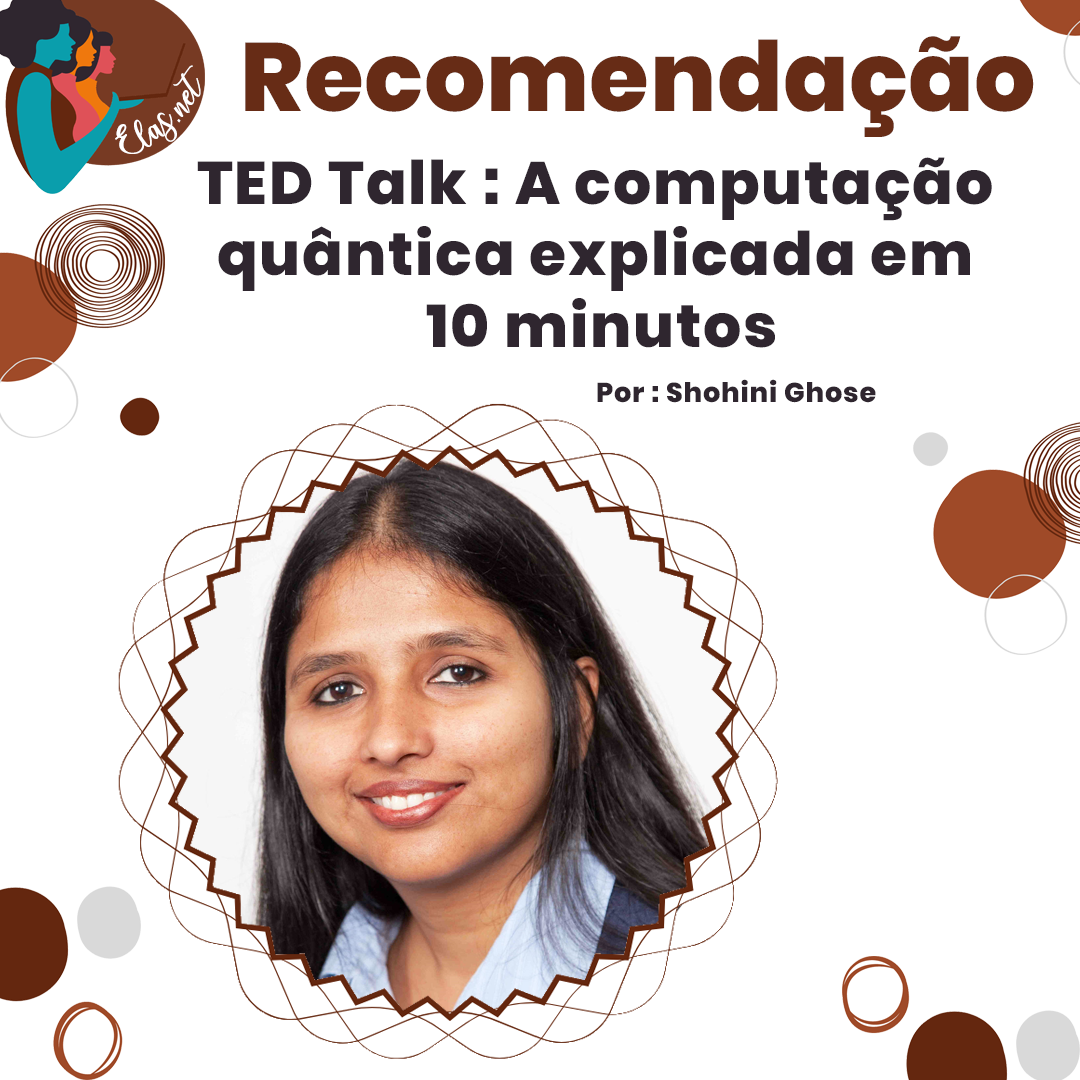
<style>
.page{position:relative;width:1080px;height:1080px;background:#ffffff}
.page>*{position:absolute;margin:0}
.t1{font:96.7px "Poppins-ExtraBold";letter-spacing:0.005em;color:#64270f}
.t2{font:25px "charlinda-Regular";color:#ffffff;scale:1.18 1}
.t3{font:60px/71.3px "Poppins-ExtraBold";letter-spacing:0.03em;color:#2f262f}
.t4{font:27.2px "Poppins-ExtraBold";letter-spacing:0.03em;color:#2f262f}
</style>
<div class="page">
<p class="t1" style="left:245px;top:36px;width:789px;height:101px">Recomendação</p>
<p class="t2" style="left:115px;top:65px;width:86px;height:89px;rotate:-43deg">Elas.net</p>
<p class="t3" style="left:197px;top:157px;width:795px;height:191px;text-align:center">TED Talk : A computação <br>quântica explicada em <br>10 minutos</p>
<p class="t4" style="left:597px;top:379px;width:279px;height:24px">Por : Shohini Ghose</p>
</div>
